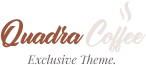
<style>
.page{position:relative;width:146px;height:65px;background:#ffffff}
.page>*{position:absolute;margin:0}
.t1{font:12px/20px "PlayfairDisplay-Italic";color:#6d6666}
.t2{font:24px "OrangePersonalUse";color:#98563f}
.t3{font:24px "OrangePersonalUse";color:#eae3e0}
</style>
<div class="page">
<p class="t1" style="left:0px;top:19px;width:146px;height:46px;text-align:center"><span class="t2">Quadra </span><span class="t3">Coffee<br></span>Exclusive Theme.</p>
</div>
